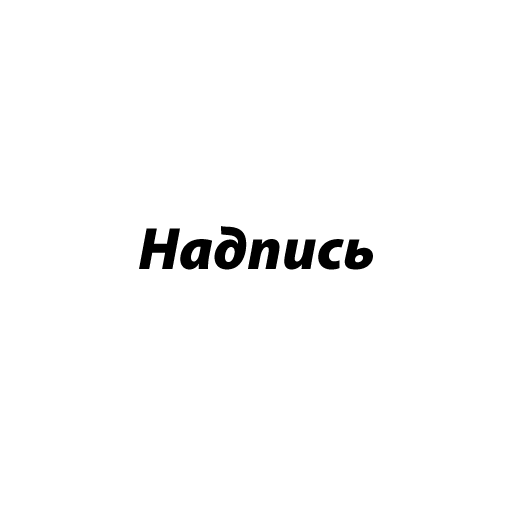
<style>
.page{position:relative;width:512px;height:512px;background:#ffffff}
.page>*{position:absolute;margin:0}
.t1{font:60px "MyriadPro-BlackIt";color:#000000}
</style>
<div class="page">
<p class="t1" style="left:139px;top:226px;width:234px;height:44px">Надпись</p>
</div>
